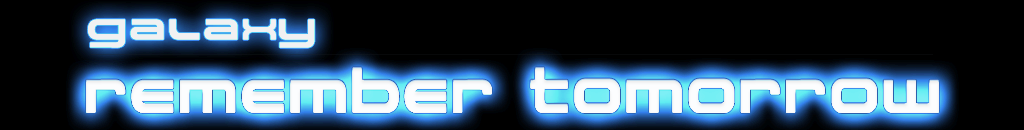
<style>
.page{position:relative;width:1024px;height:130px;background:#000000}
.page>*{position:absolute;margin:0}
.t1{font:35.4px "Spaceman";color:#dce6f1}
.t2{font:56.4px "Spaceman";color:#fbfcfd;font-weight:bold;scale:0.82 1}
</style>
<div class="page">
<p class="t1" style="left:88px;top:19px;width:227px;height:29px;opacity:0.49">Galaxy</p>
<p class="t2" style="left:86px;top:67px;width:853px;height:46px">REMEMBER TOMORROW</p>
</div>
